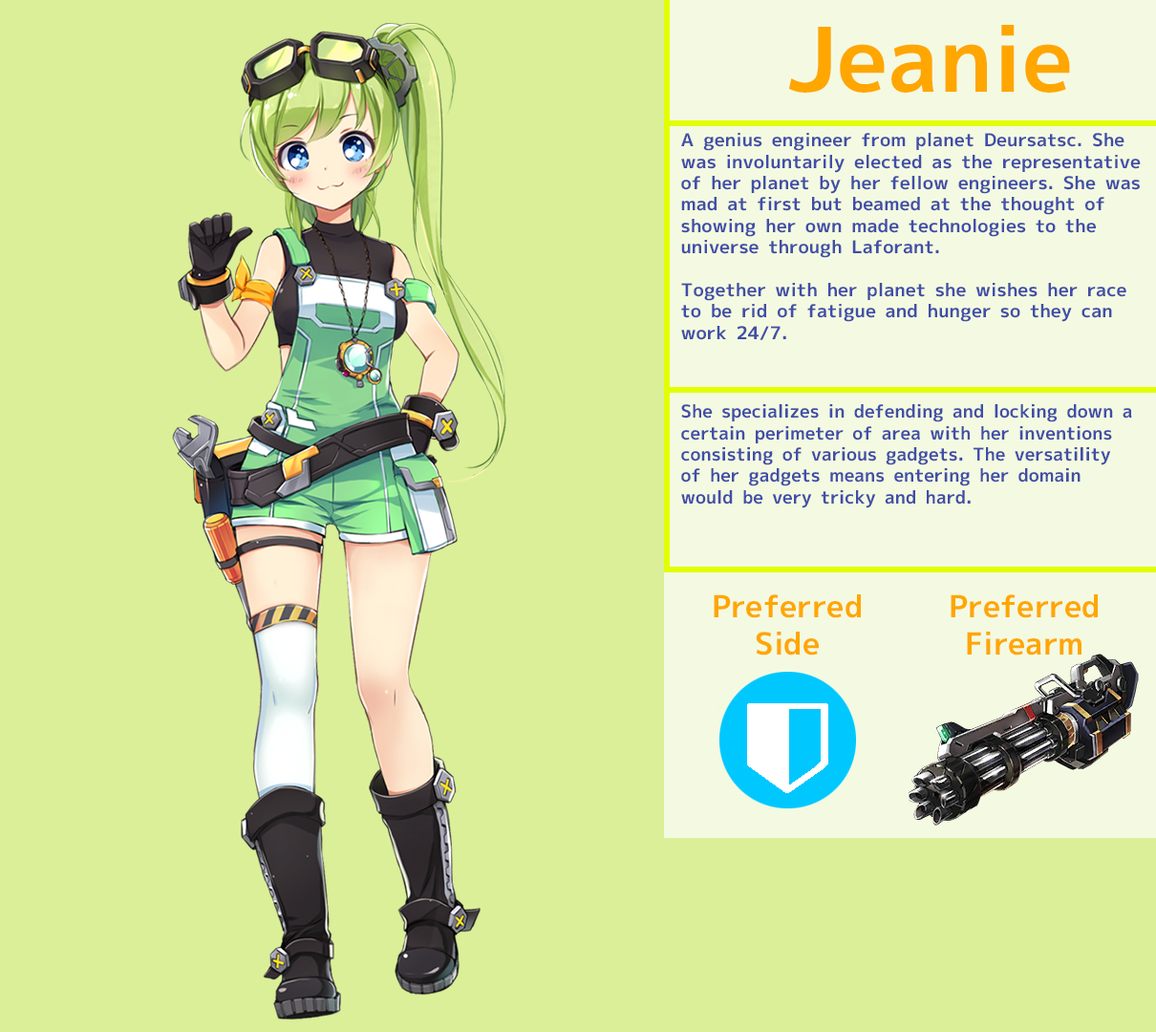
<style>
.page{position:relative;width:1156px;height:1032px;background:#dbef99}
.page>*{position:absolute;margin:0}
.t1{font:89.2px "MigMix-2P-Bold";color:#ffa600}
.t2{font:17.8px "MigMix-2P-Bold";color:#404ea7;scale:1.03 1}
.t3{font:17.8px "MigMix-2P-Bold";color:#404ea7}
.t4{font:30.6px "MigMix-2P-Bold";color:#ffa600}
</style>
<div class="page">
<p class="t1" style="left:788px;top:25px;width:282px;height:68px">Jeanie</p>
<p class="t2" style="left:681px;top:133px;width:460px;height:207px">A genius engineer from planet Deursatsc. She was involuntarily elected as the representative of her planet by her fellow engineers. She was mad at first but beamed at the thought of showing her own made technologies to the universe through Laforant.<br><br>Together with her planet she wishes her race to be rid of fatigue and hunger so they can work 24/7.</p>
<p class="t3" style="left:681px;top:404px;width:451px;height:104px">She specializes in defending and locking down a certain perimeter of area with her inventions consisting of various gadgets. The versatility of her gadgets means entering her domain would be very tricky and hard.</p>
<p class="t4" style="left:714px;top:594px;width:147px;height:61px;text-align:center">Preferred<br>Side</p>
<p class="t4" style="left:950px;top:594px;width:148px;height:61px;text-align:center">Preferred<br>Firearm</p>
</div>
